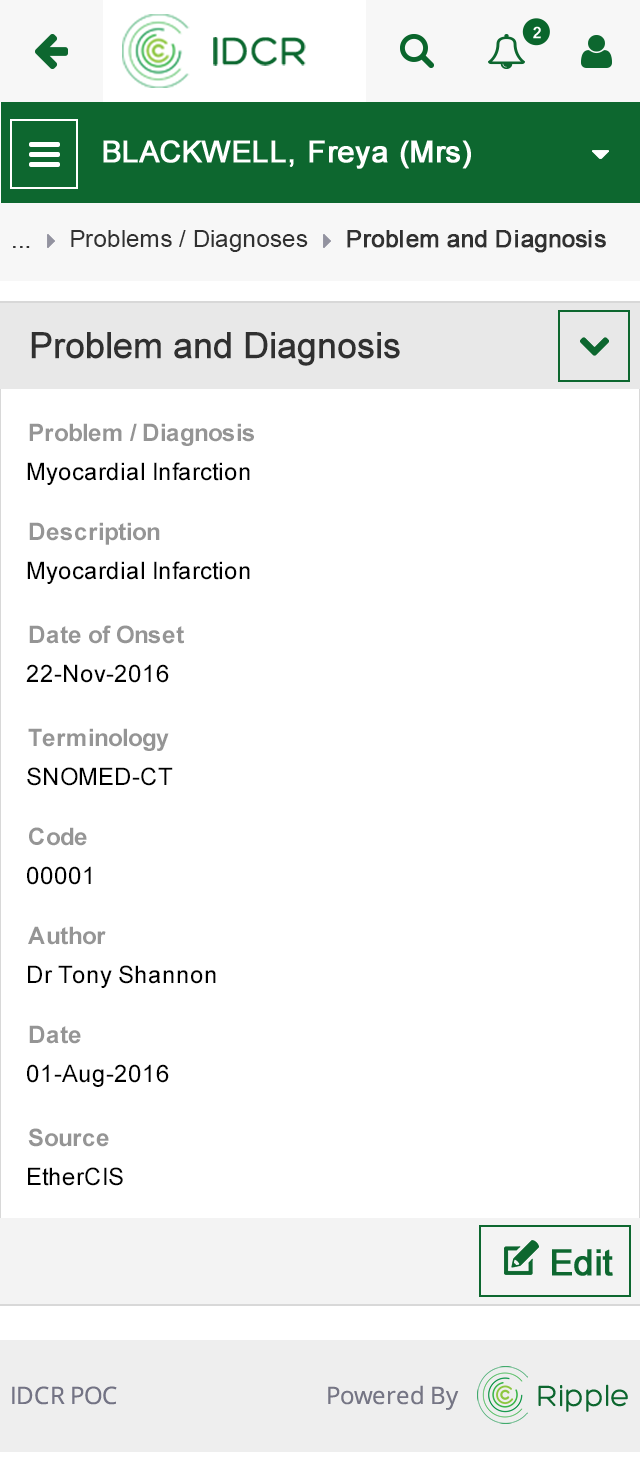
<style>
.page{position:relative;width:640px;height:1482px;background:#ffffff}
.page>*{position:absolute;margin:0}
.t1{font:24px "ArialMT";color:#313131}
.t2{font:24px "ArialMT";color:#313131;font-weight:bold}
.t3{font:36px "ArialMT";color:#303030;font-weight:bold}
.t4{font:24px "Arial-BoldMT";color:#959595}
.t5{font:24px "ArialMT";color:#000000}
</style>
<div class="page">
<p class="t1" style="left:71px;top:230px;width:237px;height:22px">Problems / Diagnoses</p>
<p class="t2" style="left:347px;top:230px;width:259px;height:23px">Problem and Diagnosis</p>
<p class="t1" style="left:13px;top:246px;width:17px;height:2px">...</p>
<p class="t3" style="left:31px;top:332px;width:369px;height:34px">Problem and Diagnosis</p>
<p class="t4" style="left:29px;top:423px;width:225px;height:23px">Problem / Diagnosis</p>
<p class="t5" style="left:27px;top:462px;width:223px;height:23px">Myocardial Infarction</p>
<p class="t4" style="left:29px;top:522px;width:131px;height:23px">Description</p>
<p class="t5" style="left:27px;top:561px;width:223px;height:23px">Myocardial Infarction</p>
<p class="t4" style="left:29px;top:625px;width:155px;height:19px">Date of Onset</p>
<p class="t5" style="left:26px;top:664px;width:143px;height:19px">22-Nov-2016</p>
<p class="t4" style="left:28px;top:728px;width:141px;height:23px">Terminology</p>
<p class="t5" style="left:27px;top:767px;width:146px;height:19px">SNOMED-CT</p>
<p class="t4" style="left:29px;top:827px;width:58px;height:19px">Code</p>
<p class="t5" style="left:27px;top:866px;width:64px;height:19px">00001</p>
<p class="t4" style="left:28px;top:926px;width:78px;height:19px">Author</p>
<p class="t5" style="left:28px;top:965px;width:188px;height:23px">Dr Tony Shannon</p>
<p class="t4" style="left:29px;top:1025px;width:52px;height:19px">Date</p>
<p class="t5" style="left:27px;top:1064px;width:142px;height:23px">01-Aug-2016</p>
<p class="t4" style="left:28px;top:1128px;width:81px;height:19px">Source</p>
<p class="t5" style="left:28px;top:1167px;width:95px;height:19px">EtherCIS</p>
</div>
